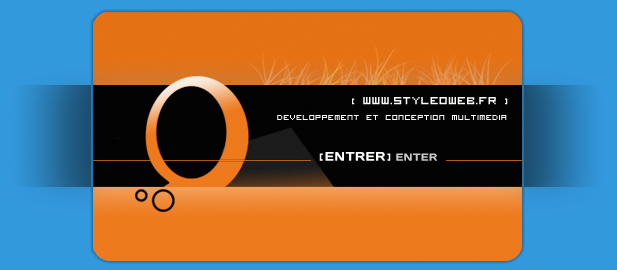
<style>
.page{position:relative;width:617px;height:270px}
.page>*{position:absolute;margin:0}
.t1{font:18.5px "VisitorTT2BRK";letter-spacing:0.025em;color:#fefdfc}
.t2{font:14.8px "VisitorTT2BRK";letter-spacing:0.025em;color:#fefdfc}
.t3{font:13px "VisitorTT2BRK";letter-spacing:0.025em;color:#fefdfc}
.t4{font:21.6px "VisitorTT2BRK";letter-spacing:0.025em;color:#fefdfc}
.t5{font:12.5px "Days";letter-spacing:0.025em;color:#fefdfc}
.t6{font:12.5px "Days";letter-spacing:0.2em;color:#fefdfc}
.t7{font:18.5px "VisitorTT2BRK";letter-spacing:0.2em;color:#fefdfc}
.t8{font:10.4px "Days";letter-spacing:0.025em;color:#cac8c7}
</style>
<div class="page">
<p class="t1" style="left:352px;top:97px;width:156px;height:8px"><span class="t2">[ </span>www.styleoweb.fr<span class="t2"> ]</span></p>
<p class="t3" style="left:277px;top:115px;width:230px;height:5px"><span class="t4"> </span>developpement et conception multimedia</p>
<p class="t5" style="left:319px;top:152px;width:118px;height:9px"><span class="t1">[</span>ENTRE<span class="t6">R</span><span class="t7">]</span><span class="t8">ENTER</span></p>
</div>
